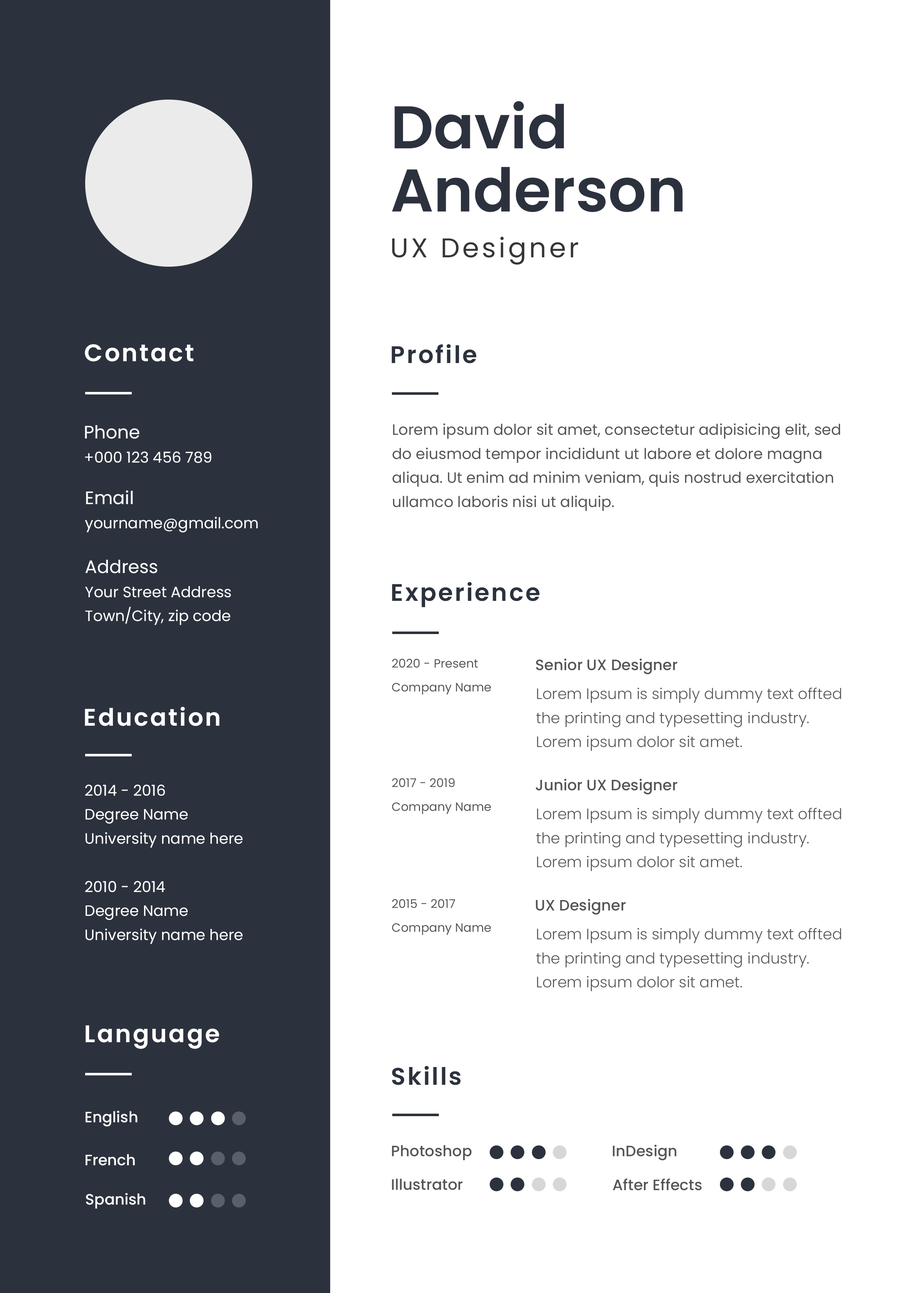
<style>
.page{position:relative;width:922px;height:1293px;background:#ffffff}
.page>*{position:absolute;margin:0}
.t1{font:60.2px/63.2px "Poppins-SemiBold";color:#2c323d}
.t2{font:27.1px "Poppins-Regular";letter-spacing:0.1em;color:#363636}
.t3{font:24.1px "Poppins-SemiBold";letter-spacing:0.075em;color:#ffffff}
.t4{font:24.1px "Poppins-SemiBold";letter-spacing:0.075em;color:#2c323d}
.t5{font:15px/24.1px "Poppins-Regular";color:#ffffff}
.t6{font:18px/24.1px "Poppins-Regular";color:#ffffff}
.t7{font:15px/24.1px "Poppins-Regular";color:#555555}
.t8{font:12px/24.1px "Poppins-Regular";color:#555555}
.t9{font:15px "Poppins-Medium";color:#555555}
.t10{font:15px/24.1px "Poppins-Light";color:#555555}
.t11{font:15px "Poppins-Medium";color:#ffffff}
</style>
<div class="page">
<p class="t1" style="left:392px;top:101px;width:291px;height:111px">David<br>Anderson</p>
<p class="t2" style="left:392px;top:237px;width:186px;height:28px">UX Designer</p>
<p class="t3" style="left:85px;top:344px;width:108px;height:18px">Contact</p>
<p class="t4" style="left:392px;top:344px;width:84px;height:19px">Profile</p>
<p class="t5" style="left:85px;top:425px;width:126px;height:38px;text-align:right"><span class="t6">Phone<br></span>+000 123 456 789</p>
<p class="t7" style="left:392px;top:423px;width:448px;height:88px">Lorem ipsum dolor sit amet, consectetur adipisicing elit, sed do eiusmod tempor incididunt ut labore et dolore magna aliqua. Ut enim ad minim veniam, quis nostrud exercitation ullamco laboris nisi ut aliquip.</p>
<p class="t5" style="left:85px;top:490px;width:173px;height:43px;text-align:right"><span class="t6">Email<br></span>yourname@gmail.com</p>
<p class="t5" style="left:85px;top:560px;width:146px;height:65px;text-align:right"><span class="t6">Address<br></span>Your Street Address<br>Town/City, zip code</p>
<p class="t4" style="left:392px;top:582px;width:148px;height:25px">Experience</p>
<p class="t8" style="left:392px;top:659px;width:99px;height:36px">2020 - Present<br>Company Name</p>
<p class="t9" style="left:536px;top:659px;width:141px;height:16px">Senior UX Designer</p>
<p class="t10" style="left:536px;top:688px;width:305px;height:63px">Lorem Ipsum is simply dummy text offted the printing and typesetting industry. Lorem ipsum dolor sit amet.</p>
<p class="t3" style="left:85px;top:707px;width:134px;height:19px">Education</p>
<p class="t5" style="left:85px;top:785px;width:158px;height:63px">2014 - 2016<br>Degree Name<br>University name here</p>
<p class="t8" style="left:392px;top:778px;width:99px;height:36px">2017 - 2019<br>Company Name</p>
<p class="t9" style="left:536px;top:779px;width:141px;height:16px">Junior UX Designer</p>
<p class="t10" style="left:536px;top:808px;width:305px;height:63px">Lorem Ipsum is simply dummy text offted the printing and typesetting industry. Lorem ipsum dolor sit amet.</p>
<p class="t5" style="left:85px;top:881px;width:158px;height:63px">2010 - 2014<br>Degree Name<br>University name here</p>
<p class="t8" style="left:392px;top:899px;width:99px;height:36px">2015 - 2017<br>Company Name</p>
<p class="t9" style="left:536px;top:899px;width:90px;height:16px">UX Designer</p>
<p class="t10" style="left:536px;top:928px;width:305px;height:63px">Lorem Ipsum is simply dummy text offted the printing and typesetting industry. Lorem ipsum dolor sit amet.</p>
<p class="t3" style="left:86px;top:1025px;width:133px;height:24px">Language</p>
<p class="t4" style="left:392px;top:1066px;width:69px;height:19px">Skills</p>
<p class="t11" style="left:86px;top:1111px;width:52px;height:16px">English</p>
<p class="t9" style="left:392px;top:1145px;width:80px;height:15px">Photoshop</p>
<p class="t9" style="left:613px;top:1145px;width:64px;height:16px">InDesign</p>
<p class="t11" style="left:86px;top:1154px;width:49px;height:12px">French</p>
<p class="t9" style="left:392px;top:1179px;width:71px;height:11px">Illustrator</p>
<p class="t9" style="left:613px;top:1178px;width:89px;height:13px">After Effects</p>
<p class="t11" style="left:86px;top:1193px;width:59px;height:16px">Spanish</p>
</div>
